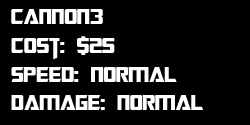
<style>
.page{position:relative;width:250px;height:125px;background:#000000}
.page>*{position:absolute;margin:0}
.t1{font:24px "TransformersMovie";color:#ffffff}
</style>
<div class="page">
<p class="t1" style="left:11px;top:9px;width:192px;height:101px">cannon3<br>Cost: $25<br>Speed: Normal<br>Damage: Normal</p>
</div>
